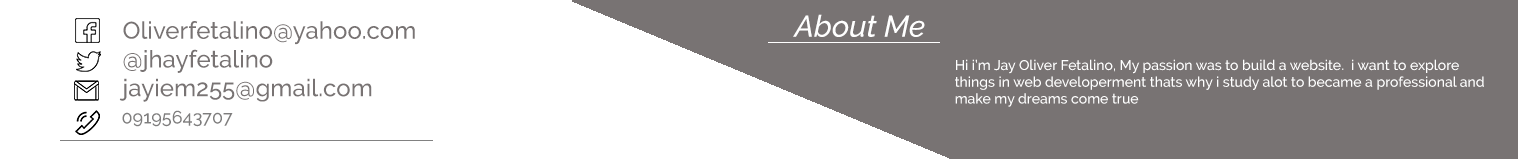
<style>
.page{position:relative;width:1518px;height:159px;background:#787373}
.page>*{position:absolute;margin:0}
.t1{font:30px "Raleway-MediumItalic";color:#ffffff}
.t2{font:24px "Raleway-Medium";color:#787373}
.t3{font:14px "Raleway-Medium";color:#ffffff}
.t4{font:18px "Raleway-Medium";color:#7e7d7d}
</style>
<div class="page">
<p class="t1" style="left:793px;top:14px;width:132px;height:23px">About Me</p>
<p class="t2" style="left:119px;top:21px;width:296px;height:81px">Oliverfetalino@yahoo.com<br>@jhayfetalino<br>jayiem255@gmail.com</p>
<p class="t3" style="left:955px;top:59px;width:529px;height:48px">Hi i’m Jay Oliver Fetalino, My passion was to build a website.  i want to explore things in web developerment thats why i study alot to became a professional and make my dreams come true</p>
<p class="t4" style="left:122px;top:110px;width:111px;height:17px">09195643707</p>
</div>
